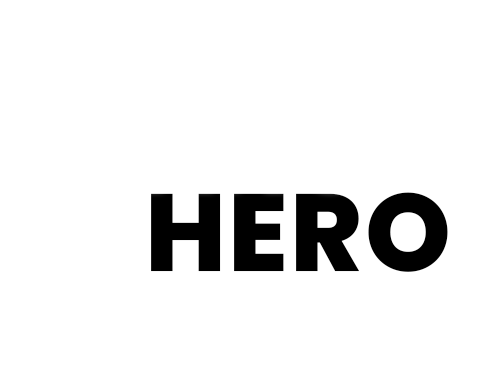
<style>
.page{position:relative;width:493px;height:384px;background:#ffffff}
.page>*{position:absolute;margin:0}
.t1{font:109.5px "Poppins-ExtraBold";letter-spacing:0.02em;color:#000000}
</style>
<div class="page">
<p class="t1" style="left:151px;top:192px;width:297px;height:80px">HERO</p>
</div>
